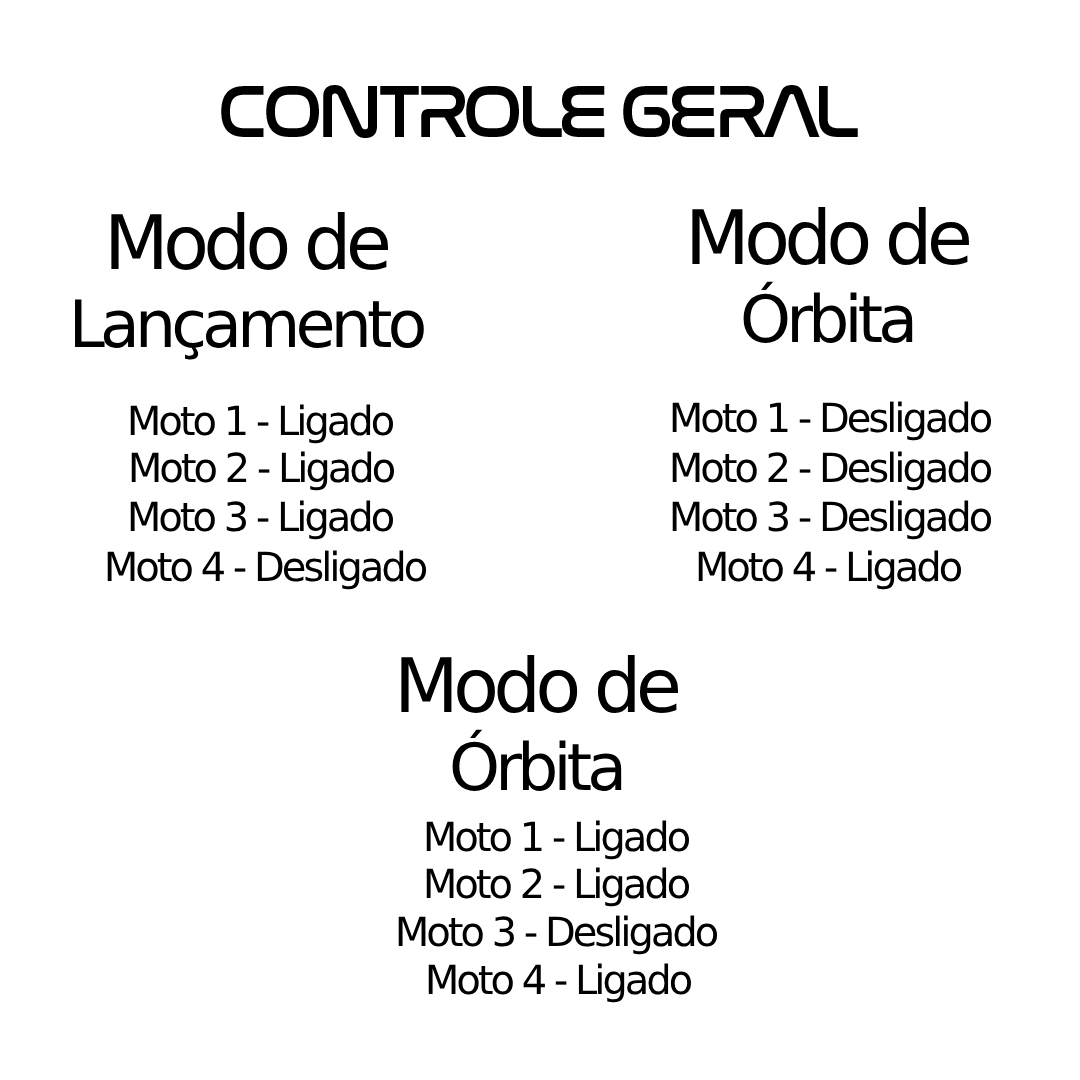
<style>
.page{position:relative;width:1080px;height:1080px;background:#ffffff}
.page>*{position:absolute;margin:0}
.t1{font:75px "NasalizationRg-Regular";letter-spacing:-0.075em;color:#000000}
.t2{font:65px "NasalizationRg-Regular";letter-spacing:-0.075em;color:#000000}
.t3{font:40px "NasalizationRg-Regular";letter-spacing:-0.075em;color:#000000}
</style>
<div class="page">
<p class="t1" style="left:221px;top:85px;width:637px;height:53px">CONTROLE GERAL</p>
<p class="t1" style="left:692px;top:207px;width:277px;height:136px;text-align:center">Modo de<br><span class="t2">Órbita</span></p>
<p class="t2" style="left:75px;top:212px;width:349px;height:148px;text-align:center"><span class="t1">Modo de<br></span>Lançamento</p>
<p class="t3" style="left:672px;top:401px;width:320px;height:40px">Moto 1 - Desligado</p>
<p class="t3" style="left:130px;top:404px;width:263px;height:40px">Moto 1 - Ligado</p>
<p class="t3" style="left:131px;top:451px;width:263px;height:40px">Moto 2 - Ligado</p>
<p class="t3" style="left:672px;top:451px;width:320px;height:40px">Moto 2 - Desligado</p>
<p class="t3" style="left:130px;top:500px;width:263px;height:40px">Moto 3 - Ligado</p>
<p class="t3" style="left:672px;top:500px;width:320px;height:40px">Moto 3 - Desligado</p>
<p class="t3" style="left:107px;top:550px;width:320px;height:40px">Moto 4 - Desligado</p>
<p class="t3" style="left:698px;top:550px;width:263px;height:40px">Moto 4 - Ligado</p>
<p class="t1" style="left:401px;top:655px;width:277px;height:136px;text-align:center">Modo de<br><span class="t2">Órbita</span></p>
<p class="t3" style="left:426px;top:820px;width:263px;height:40px">Moto 1 - Ligado</p>
<p class="t3" style="left:426px;top:867px;width:263px;height:40px">Moto 2 - Ligado</p>
<p class="t3" style="left:398px;top:915px;width:320px;height:40px">Moto 3 - Desligado</p>
<p class="t3" style="left:428px;top:963px;width:263px;height:40px">Moto 4 - Ligado</p>
</div>
